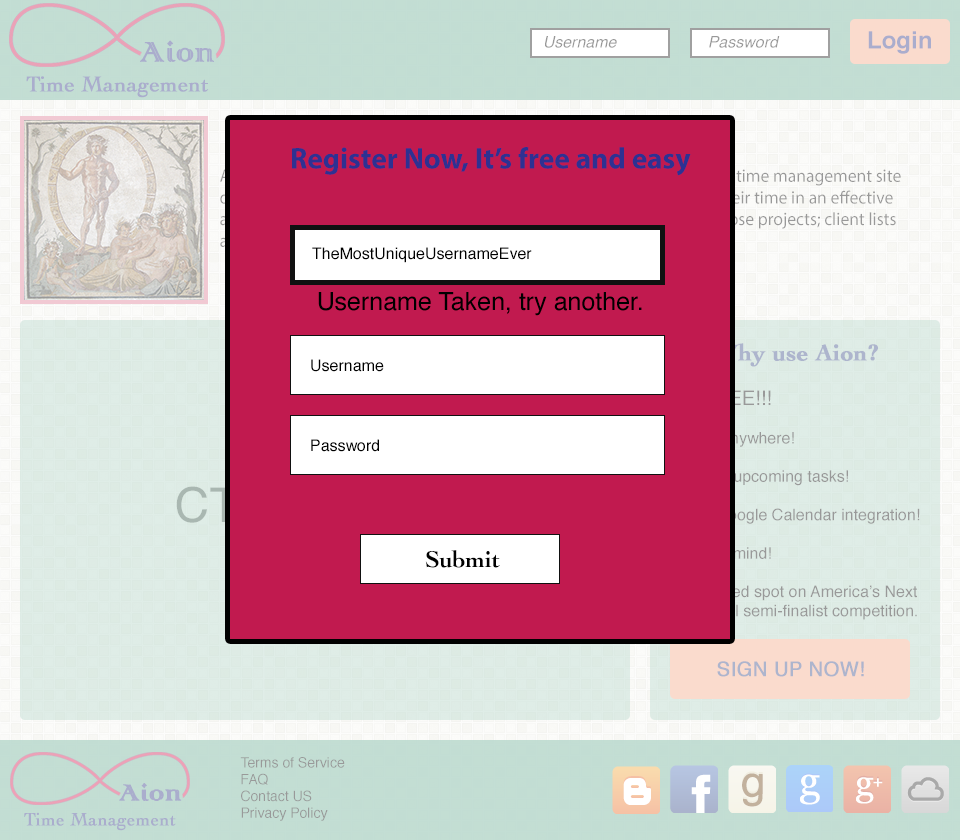
<style>
.page{position:relative;width:960px;height:840px;background:#c11a4f}
.page>*{position:absolute;margin:0}
.t1{font:36.2px "ColonnaMT";color:#aaadcd;font-weight:bold}
.t2{font:16px "Helvetica-Oblique";color:#999999}
.t3{font:24px "Helvetica-Bold";color:#aaadcd}
.t4{font:22.6px "Cochin";color:#aaadcd;font-weight:bold}
.t5{font:30px "MyriadPro-Bold";color:#2e3192}
.t6{font:16px "Helvetica";color:#000000}
.t7{font:25px "Helvetica";color:#000000}
.t8{font:24px "Cochin-Bold";color:#adb5cd;font-weight:bold}
.t9{font:24px "Cochin-Bold";color:#000000}
.t10{font:20px "Helvetica";color:#adb5cd;font-weight:bold}
.t11{font:14px "Helvetica";color:#999999}
.t12{font:30.1px "ColonnaMT";color:#aaadcd;font-weight:bold}
.t13{font:18.8px "Cochin";color:#aaadcd;font-weight:bold}
</style>
<div class="page">
<p class="t1" style="left:140px;top:40px;width:74px;height:22px">Aion</p>
<p class="t2" style="left:545px;top:36px;width:72px;height:12px">Username</p>
<p class="t2" style="left:709px;top:36px;width:71px;height:12px">Password</p>
<p class="t3" style="left:868px;top:31px;width:63px;height:23px">Login</p>
<p class="t4" style="left:26px;top:76px;width:183px;height:22px">Time Management</p>
<p class="t5" style="left:292px;top:147px;width:399px;height:29px">Register Now, It’s free and easy</p>
<p class="t6" style="left:312px;top:247px;width:220px;height:16px">TheMostUniqueUsernameEver</p>
<p class="t7" style="left:318px;top:292px;width:324px;height:24px">Username Taken, try another.</p>
<p class="t8" style="left:713px;top:343px;width:165px;height:24px">Why use Aion?</p>
<p class="t6" style="left:311px;top:359px;width:73px;height:13px">Username</p>
<p class="t6" style="left:311px;top:439px;width:68px;height:13px">Password</p>
<p class="t9" style="left:425px;top:550px;width:75px;height:18px">Submit</p>
<p class="t10" style="left:717px;top:661px;width:147px;height:16px">SIGN UP NOW!</p>
<p class="t11" style="left:240px;top:757px;width:105px;height:64px">Terms of Service<br>FAQ<br>Contact US<br>Privacy Policy</p>
<p class="t12" style="left:119px;top:783px;width:63px;height:18px">Aion</p>
<p class="t13" style="left:24px;top:812px;width:152px;height:19px">Time Management</p>
</div>
